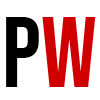
<style>
.page{position:relative;width:100px;height:100px;background:#ffffff}
.page>*{position:absolute;margin:0}
.t1{font:100px "BebasNeue-Regular";color:#000000}
.t2{font:100px "BebasNeue-Regular";color:#d00000}
</style>
<div class="page">
<p class="t1" style="left:6px;top:17px;width:90px;height:70px">P<span class="t2">W</span></p>
</div>
